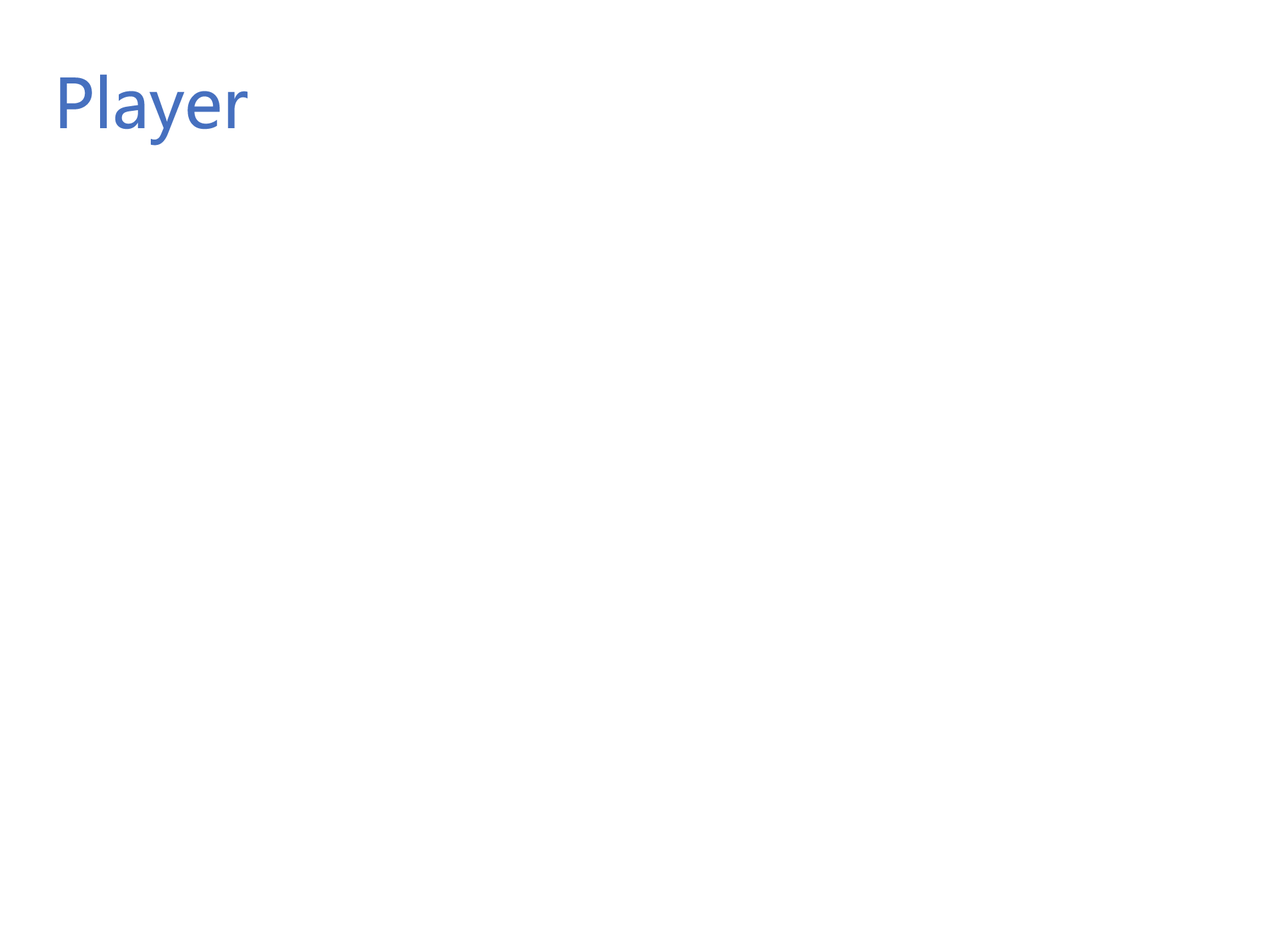
<style>
.page{position:relative;width:1261px;height:946px;background:#ffffff}
.page>*{position:absolute;margin:0}
.t1{font:66.7px "MicrosoftYaHei";color:#4670bf}
</style>
<div class="page">
<p class="t1" style="left:60px;top:74px;width:188px;height:71px">Player</p>
</div>
